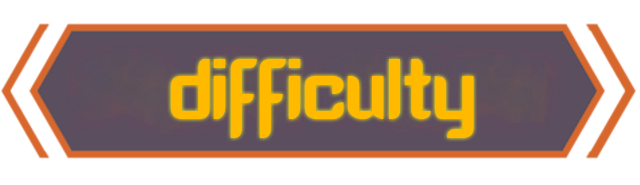
<style>
.page{position:relative;width:640px;height:185px;background:#ffffff}
.page>*{position:absolute;margin:0}
.t1{font:164.8px "koloni";color:#ffba00;scale:0.49 1}
</style>
<div class="page">
<p class="t1" style="left:170px;top:59px;width:304px;height:79px">difficulty</p>
</div>
